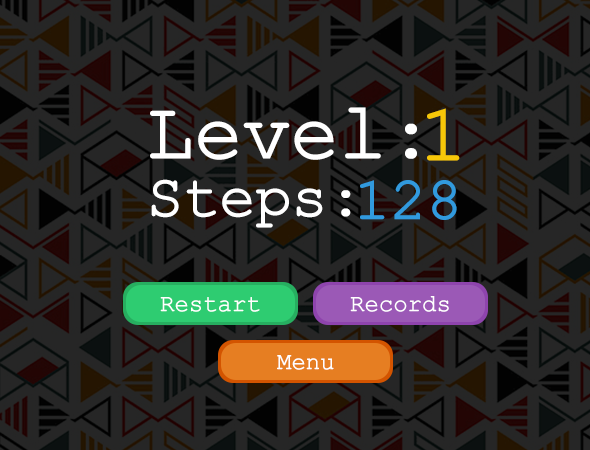
<style>
.page{position:relative;width:590px;height:450px;background:#262626}
.page>*{position:absolute;margin:0}
.t1{font:80px "ERKurierKOI8Normal";color:#ffffff}
.t2{font:80px "ERKurierKOI8Normal";color:#f7c708}
.t3{font:60px "ERKurierKOI8Normal";color:#ffffff}
.t4{font:60px "ERKurierKOI8Normal";color:#319ade}
.t5{font:24px "ERKurierKOI8Normal";color:#ffffff}
</style>
<div class="page">
<p class="t1" style="left:150px;top:107px;width:267px;height:53px">Level:</p>
<p class="t2" style="left:427px;top:108px;width:33px;height:53px">1</p>
<p class="t3" style="left:151px;top:179px;width:200px;height:49px">Steps:</p>
<p class="t4" style="left:360px;top:180px;width:97px;height:40px">128</p>
<p class="t5" style="left:160px;top:297px;width:100px;height:15px">Restart</p>
<p class="t5" style="left:350px;top:296px;width:99px;height:16px">Records</p>
<p class="t5" style="left:277px;top:355px;width:57px;height:15px">Menu</p>
</div>
